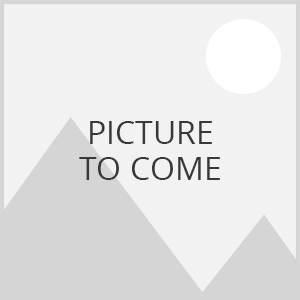
<style>
.page{position:relative;width:300px;height:300px;background:#f2f2f2}
.page>*{position:absolute;margin:0}
.t1{font:32px/36px "OpenSans";color:#383838;text-transform:uppercase}
</style>
<div class="page">
<p class="t1" style="left:79px;top:121px;width:141px;height:59px;text-align:center">Picture<br>to Come</p>
</div>
